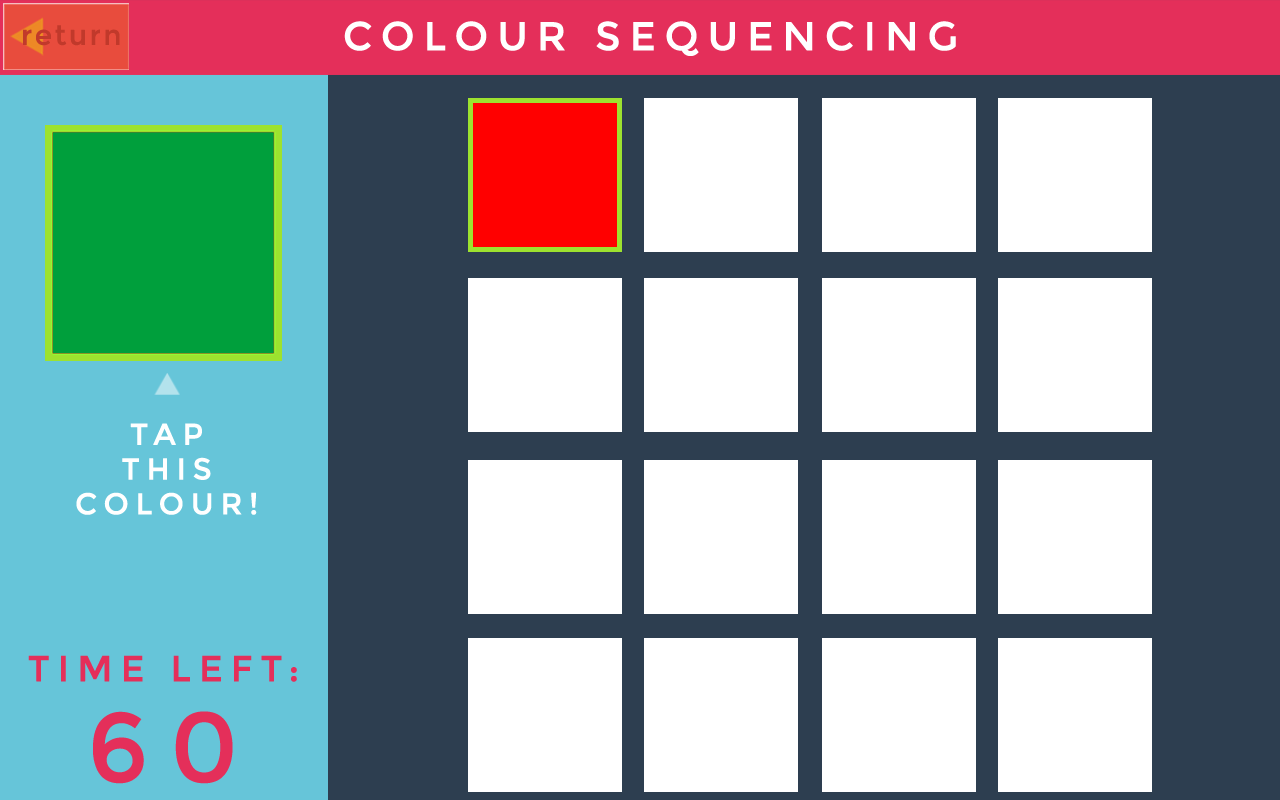
<style>
.page{position:relative;width:1280px;height:800px;background:#ffffff}
.page>*{position:absolute;margin:0}
.t1{font:27.6px "Montserrat-Regular";letter-spacing:0.075em;color:#c1392b;font-weight:bold}
.t2{font:40px "Montserrat-Regular";letter-spacing:0.2em;color:#ffffff;text-transform:uppercase;font-weight:bold}
.t3{font:30px/34.9px "Montserrat-Regular";letter-spacing:0.2em;color:#ffffff;text-transform:uppercase;font-weight:bold}
.t4{font:36px/44.9px "Montserrat-Regular";letter-spacing:0.2em;color:#e42f5a;text-transform:uppercase;font-weight:bold}
.t5{font:98px/100.9px "Montserrat-Regular";letter-spacing:0.2em;color:#e42f5a;text-transform:uppercase;font-weight:bold}
</style>
<div class="page">
<p class="t1" style="left:23px;top:25px;width:97px;height:21px">return</p>
<p class="t2" style="left:344px;top:21px;width:612px;height:35px">Colour Sequencing</p>
<p class="t3" style="left:76px;top:423px;width:181px;height:92px;text-align:center">Tap <br>This <br>colour!</p>
<p class="t4" style="left:28px;top:655px;width:269px;height:129px;text-align:center">Time Left:<br><span class="t5">60</span></p>
</div>
